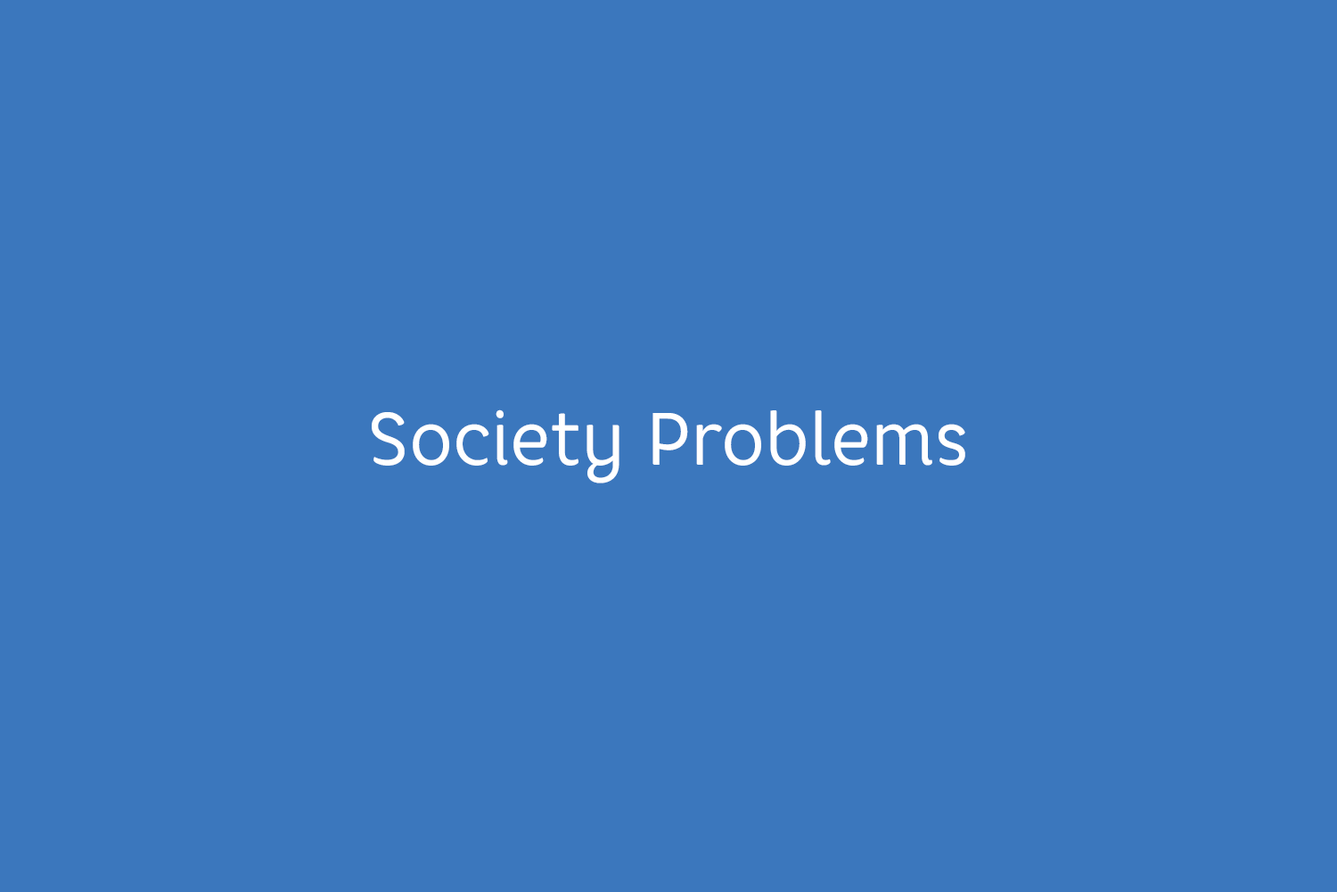
<style>
.page{position:relative;width:1337px;height:892px;background:#3b77bd}
.page>*{position:absolute;margin:0}
.t1{font:74px "CoreRhino45Regular";color:#ffffff;scale:0.94 1}
</style>
<div class="page">
<p class="t1" style="left:372px;top:409px;width:594px;height:74px">Society Problems</p>
</div>
